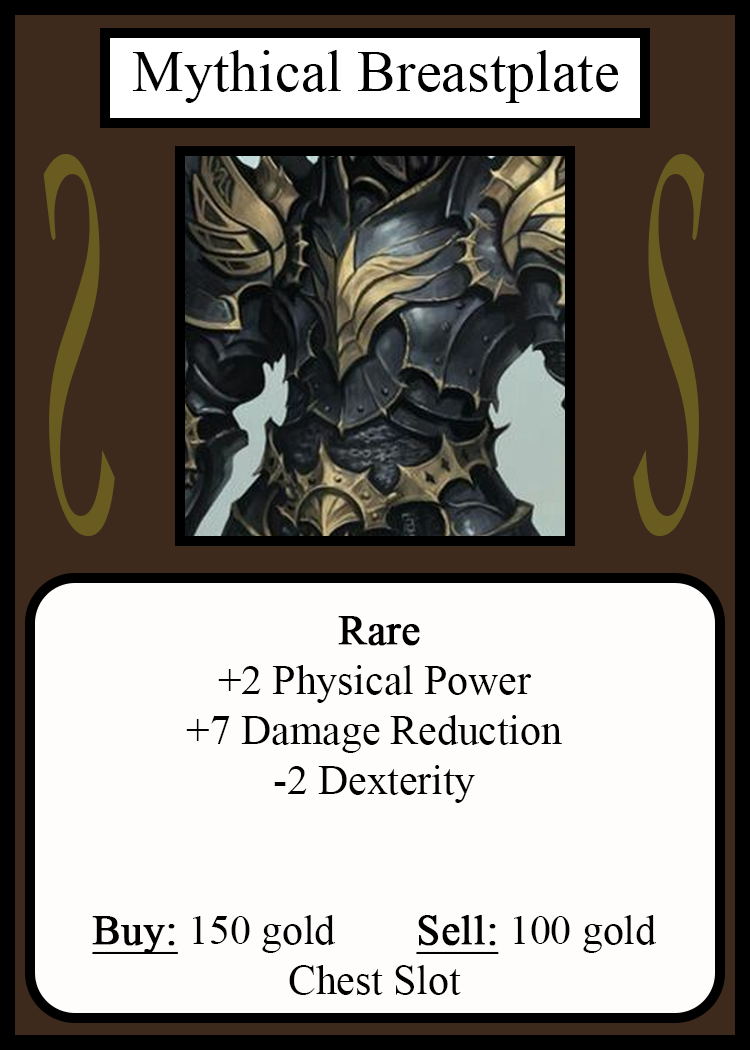
<style>
.page{position:relative;width:750px;height:1050px;background:#fffcfc}
.page>*{position:absolute;margin:0}
.t1{font:58.3px "TimesNewRomanPSMT";color:#010101}
.t2{font:548.5px "Apple-Chancery";color:#6a5c21;scale:0.27 1}
.t3{font:548.2px "Apple-Chancery";color:#6a5c21;scale:0.27 1}
.t4{font:41.7px "TimesNewRomanPSMT";color:#000000}
.t5{font:41.7px "TimesNewRomanPSMT";color:#000000;font-weight:bold}
.t6{font:41.7px "TimesNewRomanPSMT";color:#000000;font-weight:bold;text-decoration:underline}
</style>
<div class="page">
<p class="t1" style="left:132px;top:50px;width:487px;height:53px">Mythical Breastplate</p>
<p class="t2" style="left:43px;top:154px;width:72px;height:382px;rotate:180deg">S</p>
<p class="t3" style="left:633px;top:154px;width:72px;height:382px">S</p>
<p class="t4" style="left:92px;top:616px;width:565px;height:379px;text-align:center"><span class="t5">Rare</span><br>+2 Physical Power<br>+7 Damage Reduction<br>-2 Dexterity<br><br><br><span class="t6">Buy:</span> 150 gold   <span class="t6">Sell:</span> 100 gold<br>Chest Slot</p>
</div>
